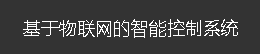
<style>
.page{position:relative;width:260px;height:54px;background:#333333}
.page>*{position:absolute;margin:0}
.t1{font:18px "MicrosoftYaHei";color:#ffffff}
</style>
<div class="page">
<p class="t1" style="left:23px;top:19px;width:215px;height:19px">基于物联网的智能控制系统</p>
</div>
